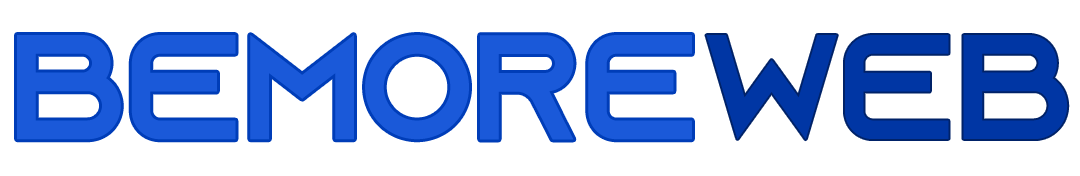
<style>
.page{position:relative;width:1080px;height:176px;background:#ffffff}
.page>*{position:absolute;margin:0}
.t1{font:148.6px "AzonixRegular";color:#1a59d9}
.t2{font:148.6px "AzonixRegular";color:#0036a4}
</style>
<div class="page">
<p class="t1" style="left:17px;top:35px;width:675px;height:105px">BeMore</p>
<p class="t2" style="left:706px;top:35px;width:362px;height:105px">Web</p>
</div>
